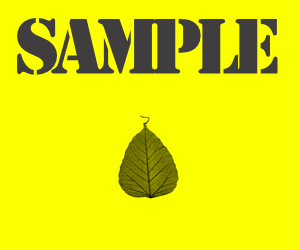
<style>
.page{position:relative;width:300px;height:250px;background:#fcff00}
.page>*{position:absolute;margin:0}
.t1{font:82px "Stencil";letter-spacing:-0.068em;color:#3f3e3e}
</style>
<div class="page">
<p class="t1" style="left:17px;top:18px;width:272px;height:76px">sample</p>
</div>
